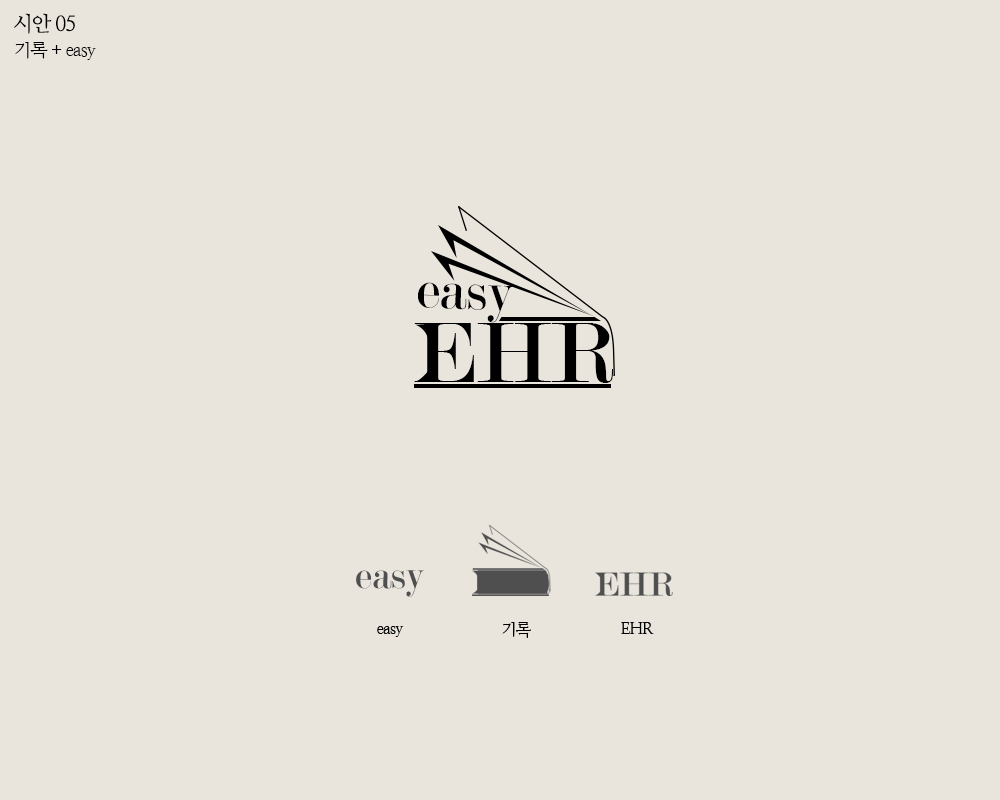
<style>
.page{position:relative;width:1000px;height:800px;background:#e9e5dd}
.page>*{position:absolute;margin:0}
.t1{font:20.9px "NanumMyeongjo";letter-spacing:-0.06em;color:#000000}
.t2{font:18.2px "NanumMyeongjo";letter-spacing:-0.06em;color:#000000}
.t3{font:58px "Modern-Regular";color:#000000}
.t4{font:91px "Modern-Regular";color:#000000}
</style>
<div class="page">
<p class="t1" style="left:14px;top:13px;width:61px;height:21px">시안 05</p>
<p class="t2" style="left:15px;top:42px;width:81px;height:18px">기록 + easy</p>
<p class="t3" style="left:418px;top:282px;width:96px;height:41px;rotate:2deg">easy</p>
<p class="t4" style="left:414px;top:323px;width:199px;height:60px">EHR</p>
</div>
